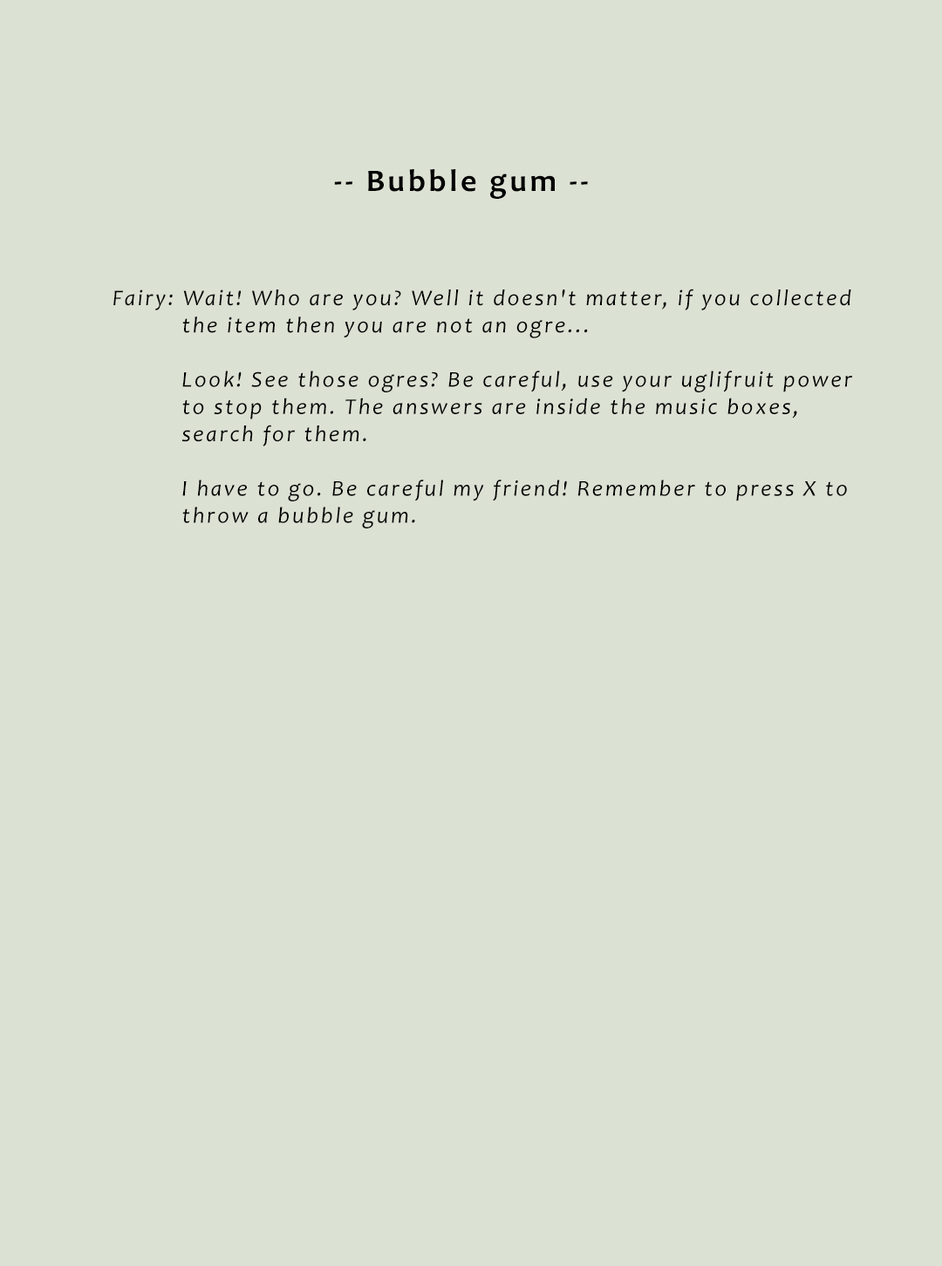
<style>
.page{position:relative;width:942px;height:1266px;background:#dbe1d3}
.page>*{position:absolute;margin:0}
.t1{font:31.4px "Candara-Bold";letter-spacing:0.1em;color:#000000}
.t2{font:22.7px "Candara-Italic";letter-spacing:0.1em;color:#000000}
</style>
<div class="page">
<p class="t1" style="left:334px;top:169px;width:254px;height:30px">-- Bubble gum --</p>
<p class="t2" style="left:113px;top:289px;width:740px;height:239px">Fairy: Wait! Who are you? Well it doesn't matter, if you collected <br>          the item then you are not an ogre...<br>          <br>          Look! See those ogres? Be careful, use your uglifruit power <br>          to stop them. The answers are inside the music boxes, <br>          search for them.<br><br>          I have to go. Be careful my friend! Remember to press X to <br>          throw a bubble gum.</p>
</div>
